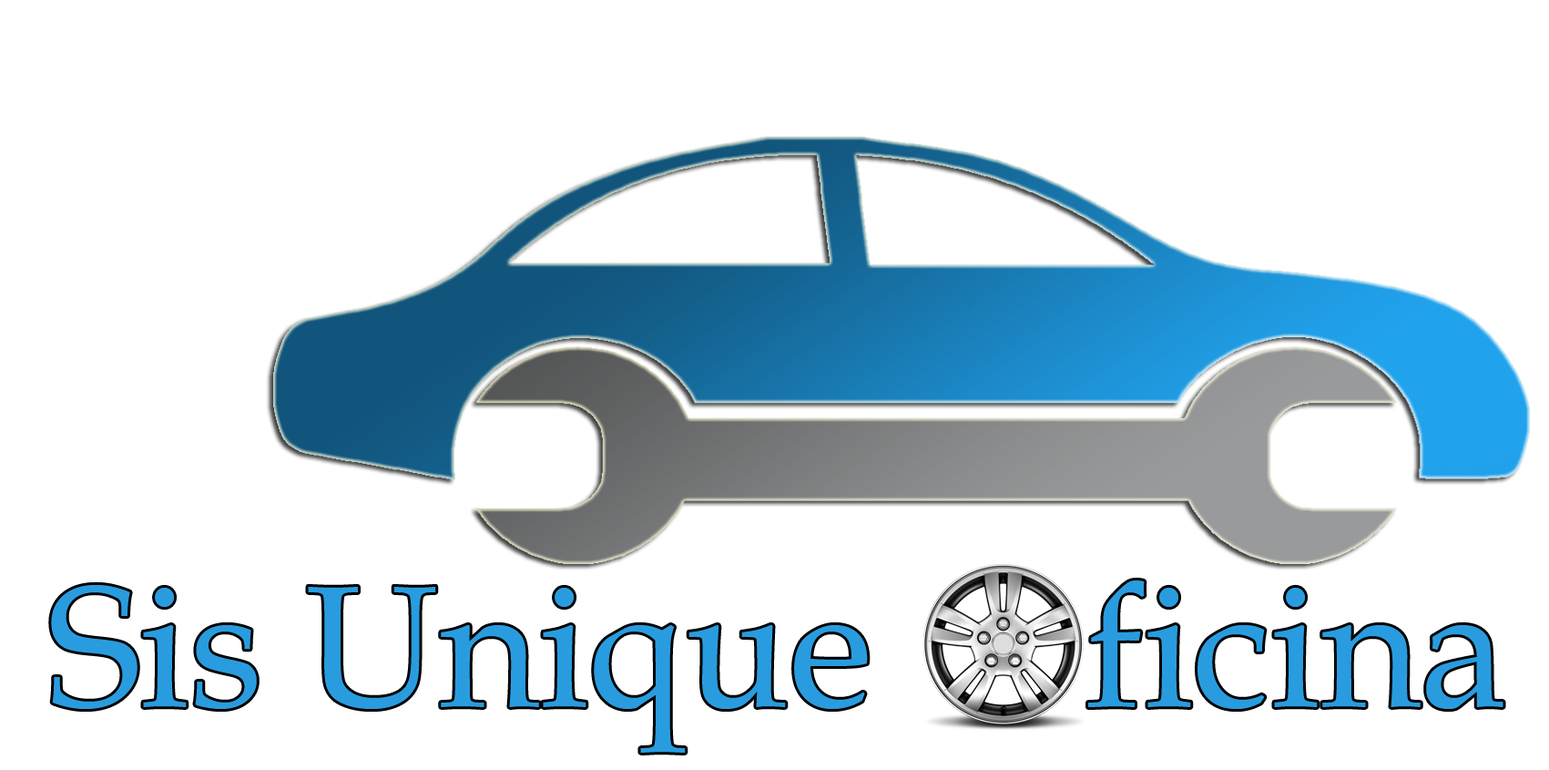
<style>
.page{position:relative;width:1549px;height:770px;background:#ffffff}
.page>*{position:absolute;margin:0}
.t1{font:172px "BookAntiqua";color:#299cdf}
</style>
<div class="page">
<p class="t1" style="left:51px;top:579px;width:1453px;height:173px">Sis Unique     ficina</p>
</div>
